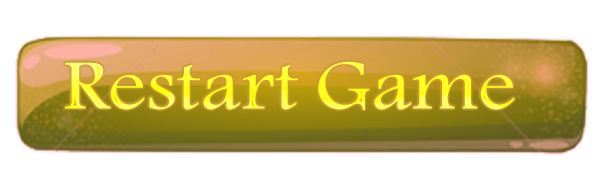
<style>
.page{position:relative;width:599px;height:193px;background:#ffffff}
.page>*{position:absolute;margin:0}
.t1{font:72.9px "K-Sina";scale:1.16 1}
</style>
<div class="page">
<p class="t1" style="left:65px;top:61px;width:450px;height:49px">Restart Game</p>
</div>
